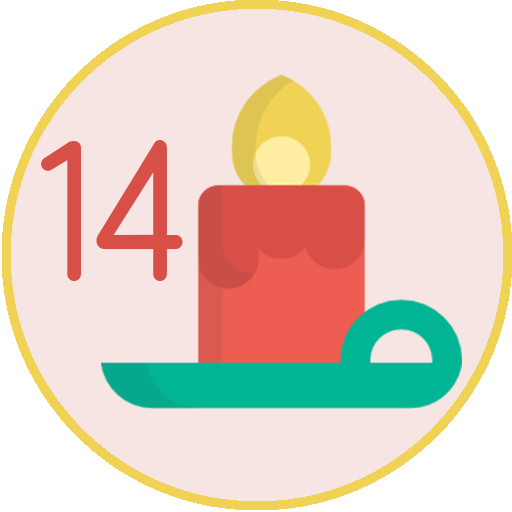
<style>
.page{position:relative;width:512px;height:512px;background:#f7e5e4}
.page>*{position:absolute;margin:0}
.t1{font:220.4px "Antipasto";color:#d84f48}
</style>
<div class="page">
<p class="t1" style="left:41px;top:140px;width:142px;height:141px">14</p>
</div>
